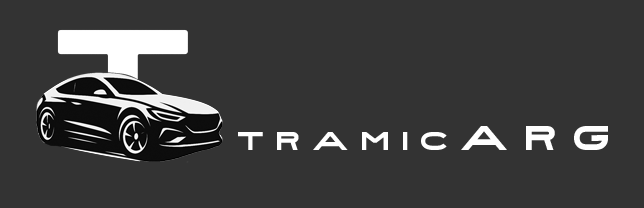
<style>
.page{position:relative;width:644px;height:208px;background:#333333}
.page>*{position:absolute;margin:0}
.t1{font:36px "helssanserif";color:#ffffff}
.t2{font:48px "helssanserif";color:#ffffff}
</style>
<div class="page">
<p class="t1" style="left:238px;top:126px;width:370px;height:24px"><span class="t2"><br></span>Tramic<span class="t2">ARG</span></p>
</div>
